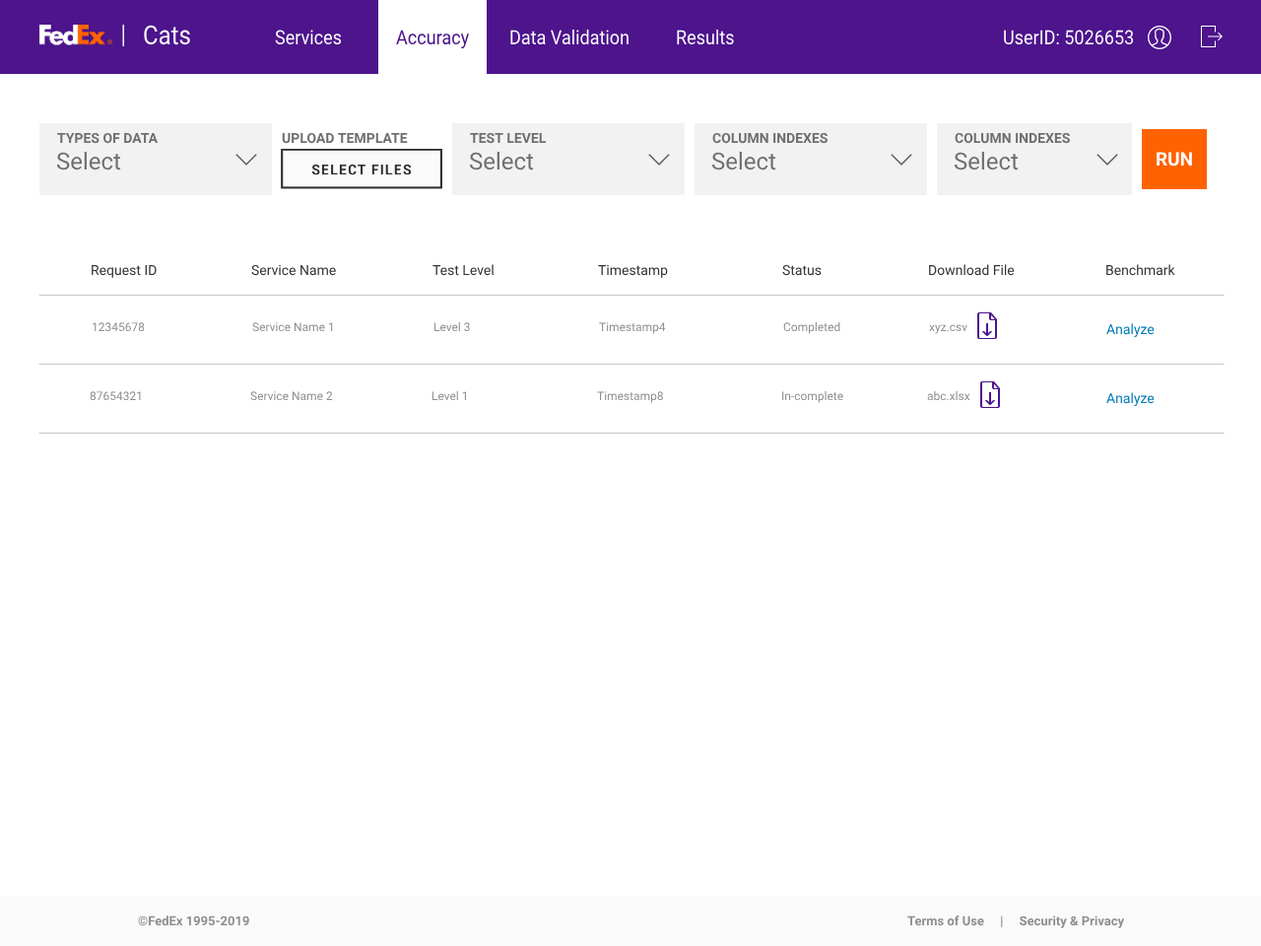
<style>
.page{position:relative;width:1261px;height:946px;background:#ffffff}
.page>*{position:absolute;margin:0}
.t1{font:26.1px "Roboto-Regular";color:#ffffff;scale:0.9 1}
.t2{font:19.7px "Roboto-Regular";color:#ffffff;scale:0.9 1}
.t3{font:19.7px "Roboto-Regular";color:#4d148c;scale:0.9 1}
.t4{font:13.8px "Roboto-Bold";color:#6f6f6f;text-transform:uppercase}
.t5{font:23.6px "Roboto-Regular";color:#6f6f6f}
.t6{font:18.7px "Roboto-Bold";color:#ffffff;text-transform:uppercase}
.t7{font:13.8px "Roboto-Regular";color:#333333}
.t8{font:11.8px "Roboto-Regular";color:#8e8e8e}
.t9{font:13.8px "Roboto-Regular";color:#007ab7}
.t10{font:12.8px "Roboto-Bold";color:#8e8e8e}
</style>
<div class="page">
<p class="t1" style="left:144px;top:25px;width:46px;height:20px">Cats</p>
<p class="t2" style="left:275px;top:30px;width:67px;height:15px">Services</p>
<p class="t3" style="left:396px;top:30px;width:73px;height:19px">Accuracy</p>
<p class="t2" style="left:510px;top:29px;width:118px;height:16px">Data Validation</p>
<p class="t2" style="left:677px;top:29px;width:57px;height:16px">Results</p>
<p class="t2" style="left:1004px;top:30px;width:130px;height:15px">UserID: 5026653</p>
<p class="t4" style="left:57px;top:132px;width:102px;height:12px">Types Of Data</p>
<p class="t4" style="left:282px;top:132px;width:126px;height:12px">Upload Template</p>
<p class="t4" style="left:470px;top:132px;width:77px;height:12px">Test Level</p>
<p class="t4" style="left:712px;top:132px;width:115px;height:12px">Column Indexes</p>
<p class="t4" style="left:955px;top:132px;width:115px;height:12px">Column Indexes</p>
<p class="t5" style="left:56px;top:152px;width:65px;height:18px">Select</p>
<p class="t5" style="left:469px;top:152px;width:65px;height:18px">Select</p>
<p class="t5" style="left:711px;top:152px;width:65px;height:18px">Select</p>
<p class="t5" style="left:954px;top:152px;width:65px;height:18px">Select</p>
<p class="t6" style="left:1156px;top:152px;width:36px;height:14px">Run</p>
<p class="t7" style="left:92px;top:265px;width:65px;height:13px">Request ID</p>
<p class="t7" style="left:251px;top:264px;width:85px;height:12px">Service Name</p>
<p class="t7" style="left:432px;top:264px;width:62px;height:12px">Test Level</p>
<p class="t7" style="left:598px;top:264px;width:70px;height:14px">Timestamp</p>
<p class="t7" style="left:782px;top:264px;width:40px;height:12px">Status</p>
<p class="t7" style="left:929px;top:264px;width:86px;height:12px">Download File</p>
<p class="t7" style="left:1106px;top:264px;width:69px;height:12px">Benchmark</p>
<p class="t8" style="left:92px;top:322px;width:53px;height:10px">12345678</p>
<p class="t8" style="left:252px;top:322px;width:81px;height:10px">Service Name 1</p>
<p class="t8" style="left:433px;top:322px;width:37px;height:10px">Level 3</p>
<p class="t8" style="left:599px;top:322px;width:67px;height:12px">Timestamp4</p>
<p class="t8" style="left:783px;top:322px;width:57px;height:12px">Completed</p>
<p class="t8" style="left:929px;top:324px;width:38px;height:10px">xyz.csv</p>
<p class="t9" style="left:1106px;top:323px;width:49px;height:14px">Analyze</p>
<p class="t8" style="left:90px;top:391px;width:51px;height:10px">87654321</p>
<p class="t8" style="left:250px;top:391px;width:83px;height:10px">Service Name 2</p>
<p class="t8" style="left:431px;top:391px;width:35px;height:10px">Level 1</p>
<p class="t8" style="left:597px;top:391px;width:66px;height:12px">Timestamp8</p>
<p class="t8" style="left:782px;top:391px;width:61px;height:12px">In-complete</p>
<p class="t8" style="left:927px;top:391px;width:43px;height:10px">abc.xlsx</p>
<p class="t9" style="left:1106px;top:392px;width:49px;height:14px">Analyze</p>
<p class="t10" style="left:138px;top:915px;width:111px;height:11px">©FedEx 1995-2019</p>
<p class="t10" style="left:907px;top:915px;width:218px;height:13px">Terms of Use     |     Security &amp; Privacy</p>
</div>
